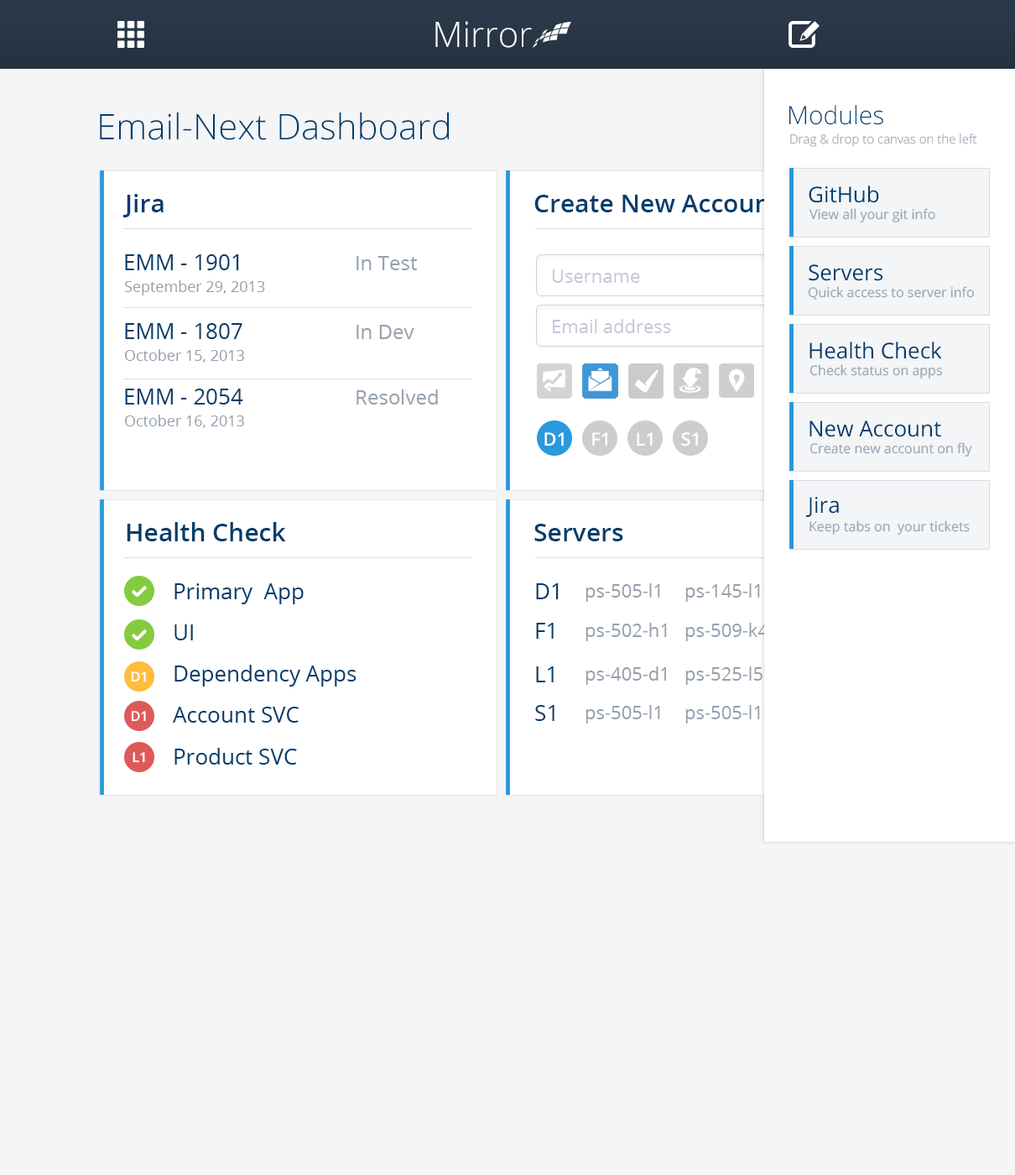
<style>
.page{position:relative;width:1015px;height:1175px;background:#f3f5f7}
.page>*{position:absolute;margin:0}
.t1{font:35.2px "OpenSans-Light";color:#fcfcfc}
.t2{font:35.2px "OpenSans-Light";color:#003d6c}
.t3{font:25.2px "OpenSans-Light";color:#003d6c}
.t4{font:12.6px "OpenSans-Light";color:#9da7b3}
.t5{font:21.8px "OpenSans";color:#003d6c}
.t6{font:25.2px "OpenSans-Semibold";color:#003d6c}
.t7{font:13.4px "OpenSans";color:#9da7b3}
.t8{font:20.1px "OpenSans";color:#95a0ad}
.t9{font:18.5px "OpenSans";color:#c5cad6}
.t10{font:15.1px "OpenSans";color:#95a0ad}
.t11{font:18.2px "OpenSans-Semibold";color:#ffffff}
.t12{font:18.5px "OpenSans";color:#95a0ad}
.t13{font:13.6px "OpenSans-Semibold";color:#ffffff}
</style>
<div class="page">
<p class="t1" style="left:435px;top:21px;width:97px;height:27px">Mirror</p>
<p class="t2" style="left:100px;top:112px;width:349px;height:28px">Email-Next Dashboard</p>
<p class="t3" style="left:789px;top:105px;width:94px;height:20px">Modules</p>
<p class="t4" style="left:790px;top:133px;width:187px;height:14px">Drag &amp; drop to canvas on the left</p>
<p class="t5" style="left:809px;top:185px;width:70px;height:18px">GitHub</p>
<p class="t6" style="left:122px;top:194px;width:42px;height:23px">Jira</p>
<p class="t6" style="left:534px;top:195px;width:246px;height:17px">Create New Account</p>
<p class="t7" style="left:809px;top:208px;width:126px;height:14px">View all your git info</p>
<p class="t5" style="left:125px;top:254px;width:114px;height:16px">EMM - 1901</p>
<p class="t8" style="left:357px;top:256px;width:61px;height:14px">In Test</p>
<p class="t9" style="left:552px;top:269px;width:88px;height:14px">Username</p>
<p class="t5" style="left:809px;top:264px;width:74px;height:17px">Servers</p>
<p class="t10" style="left:124px;top:280px;width:141px;height:15px">September 29, 2013</p>
<p class="t7" style="left:808px;top:286px;width:166px;height:14px">Quick access to server info</p>
<p class="t5" style="left:125px;top:323px;width:117px;height:16px">EMM - 1807</p>
<p class="t8" style="left:357px;top:325px;width:57px;height:14px">In Dev</p>
<p class="t9" style="left:553px;top:319px;width:118px;height:14px">Email address</p>
<p class="t5" style="left:810px;top:341px;width:132px;height:18px">Health Check</p>
<p class="t10" style="left:125px;top:349px;width:119px;height:13px">October 15, 2013</p>
<p class="t7" style="left:810px;top:364px;width:133px;height:14px">Check status on apps</p>
<p class="t5" style="left:125px;top:388px;width:118px;height:16px">EMM - 2054</p>
<p class="t8" style="left:357px;top:389px;width:81px;height:15px">Resolved</p>
<p class="t10" style="left:125px;top:414px;width:119px;height:14px">October 16, 2013</p>
<p class="t5" style="left:810px;top:420px;width:131px;height:17px">New Account</p>
<p class="t11" style="left:545px;top:432px;width:19px;height:14px">D1</p>
<p class="t11" style="left:592px;top:432px;width:15px;height:14px">F1</p>
<p class="t11" style="left:637px;top:432px;width:16px;height:14px">L1</p>
<p class="t11" style="left:681px;top:432px;width:17px;height:14px">S1</p>
<p class="t7" style="left:810px;top:442px;width:162px;height:14px">Create new account on fly</p>
<p class="t5" style="left:806px;top:497px;width:33px;height:20px">Jira</p>
<p class="t6" style="left:127px;top:522px;width:159px;height:19px">Health Check</p>
<p class="t7" style="left:810px;top:520px;width:160px;height:14px">Keep tabs on  your tickets</p>
<p class="t6" style="left:534px;top:524px;width:89px;height:17px">Servers</p>
<p class="t5" style="left:175px;top:583px;width:129px;height:21px">Primary  App</p>
<p class="t5" style="left:536px;top:583px;width:23px;height:16px">D1</p>
<p class="t12" style="left:586px;top:583px;width:74px;height:19px">ps-505-l1</p>
<p class="t12" style="left:685px;top:583px;width:75px;height:19px">ps-145-l1</p>
<p class="t5" style="left:175px;top:624px;width:18px;height:16px">UI</p>
<p class="t5" style="left:536px;top:623px;width:18px;height:15px">F1</p>
<p class="t12" style="left:586px;top:623px;width:81px;height:18px">ps-502-h1</p>
<p class="t12" style="left:685px;top:623px;width:84px;height:18px">ps-509-k4</p>
<p class="t5" style="left:175px;top:664px;width:182px;height:22px">Dependency Apps</p>
<p class="t13" style="left:131px;top:671px;width:15px;height:11px">D1</p>
<p class="t5" style="left:536px;top:666px;width:18px;height:16px">L1</p>
<p class="t12" style="left:586px;top:666px;width:80px;height:19px">ps-405-d1</p>
<p class="t12" style="left:685px;top:666px;width:78px;height:19px">ps-525-l5</p>
<p class="t13" style="left:131px;top:711px;width:15px;height:11px">D1</p>
<p class="t5" style="left:173px;top:706px;width:126px;height:16px">Account SVC</p>
<p class="t5" style="left:535px;top:705px;width:20px;height:16px">S1</p>
<p class="t12" style="left:586px;top:705px;width:74px;height:18px">ps-505-l1</p>
<p class="t12" style="left:685px;top:705px;width:75px;height:18px">ps-505-l1</p>
<p class="t5" style="left:175px;top:748px;width:122px;height:16px">Product SVC</p>
<p class="t13" style="left:133px;top:752px;width:12px;height:11px">L1</p>
</div>
